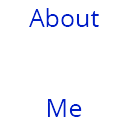
<style>
.page{position:relative;width:128px;height:128px;background:#ffffff}
.page>*{position:absolute;margin:0}
.t1{font:25px "OpenSans";color:#001ab8}
</style>
<div class="page">
<p class="t1" style="left:29px;top:8px;width:70px;height:109px;text-align:center">About<br><br><br>Me</p>
</div>
